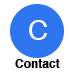
<style>
.page{position:relative;width:75px;height:75px;background:#ffffff}
.page>*{position:absolute;margin:0}
.t1{font:28px "Helvetica";color:#fffefe}
.t2{font:12px "Helvetica-Bold";color:#000000}
</style>
<div class="page">
<p class="t1" style="left:29px;top:20px;width:18px;height:20px">C</p>
<p class="t2" style="left:15px;top:59px;width:45px;height:9px">Contact</p>
</div>
